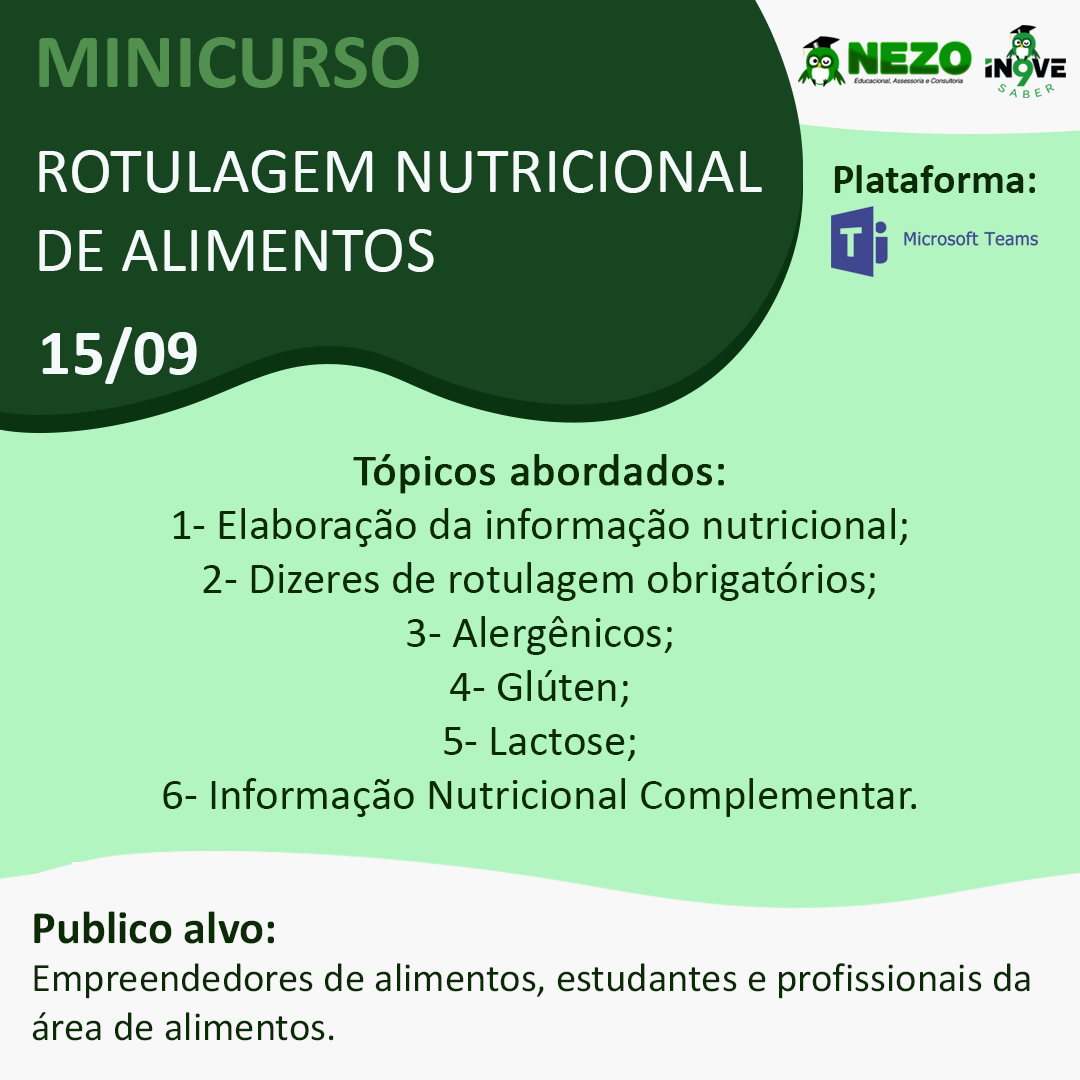
<style>
.page{position:relative;width:1080px;height:1080px;background:#b2f5c0}
.page>*{position:absolute;margin:0}
.t1{font:65.3px/105px "Calibri";color:#f4faf9}
.t2{font:78.3px "Calibri-Bold";color:#529050}
.t3{font:65.3px "Calibri";color:#f4faf9}
.t4{font:65.3px/103px "Calibri-Bold";color:#f4faf9}
.t5{font:42.3px "Calibri-Bold";color:#0a2b05}
.t6{font:45px "Calibri";color:#0a2b05}
.t7{font:45px "Calibri";color:#0a2b05;font-weight:bold}
.t8{font:40.6px "Calibri";color:#0a2b05}
.t9{font:46.5px/48.9px "Calibri-Bold";color:#0a2b05}
</style>
<div class="page">
<p class="t1" style="left:39px;top:37px;width:723px;height:347px"><span class="t2">MINICURSO<br></span>ROTULAGEM NUTRICIO<span class="t3">NAL DE ALIMENTOS<br></span><span class="t4">15/09</span></p>
<p class="t5" style="left:834px;top:165px;width:201px;height:28px">Plataforma:</p>
<p class="t6" style="left:163px;top:454px;width:753px;height:363px;text-align:center"><span class="t7">Tópicos abordados:<br></span>1- Elaboração da informação nutricional;<br>2- Dizeres de rotulagem obrigatórios;<br>3- Alergênicos;<br>4- Glúten;<br>5- Lactose;<br>6- Informação Nutricional Complementar.</p>
<p class="t8" style="left:32px;top:911px;width:998px;height:130px"><span class="t9">Publico alvo:<br></span>Empreendedores de alimentos, estudantes e profissionais da área de alimentos.</p>
</div>
